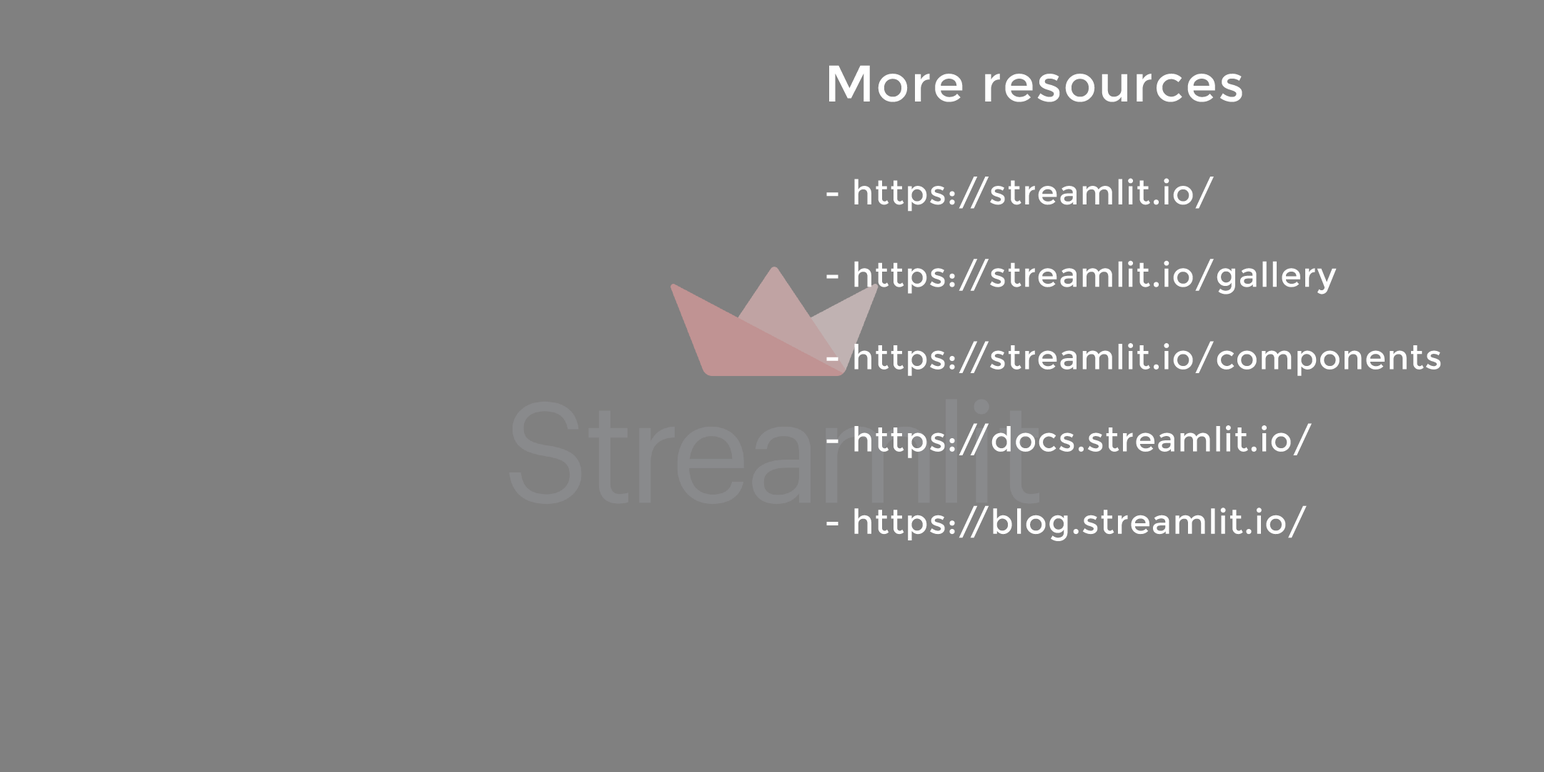
<style>
.page{position:relative;width:1544px;height:772px;background:#808080}
.page>*{position:absolute;margin:0}
.t1{font:34.3px "Montserrat-Regular";letter-spacing:0.025em;color:#ffffff}
.t2{font:51.5px "Montserrat-Regular";letter-spacing:0.025em;color:#ffffff}
</style>
<div class="page">
<p class="t1" style="left:826px;top:65px;width:615px;height:476px"><span class="t2">More resources<br><br></span>- https://streamlit.io/<br><br>- https://streamlit.io/gallery<br><br>- https://streamlit.io/components<br><br>- https://docs.streamlit.io/<br><br>- https://blog.streamlit.io/</p>
</div>
